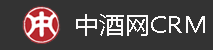
<style>
.page{position:relative;width:213px;height:50px;background:#333333}
.page>*{position:absolute;margin:0}
.t1{font:23.1px "MicrosoftYaHei";color:#fbfafa;scale:1.1 1}
</style>
<div class="page">
<p class="t1" style="left:76px;top:14px;width:129px;height:22px">中酒网CRM</p>
</div>
